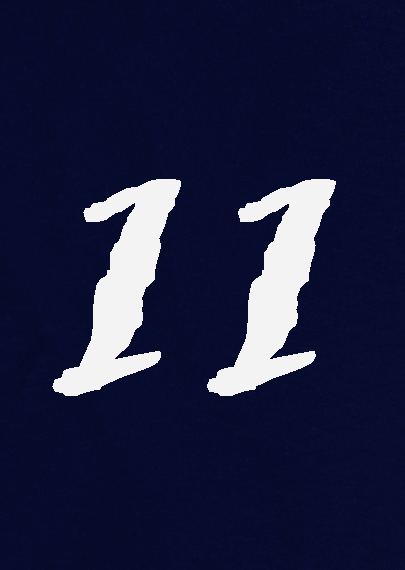
<style>
.page{position:relative;width:405px;height:570px}
.page>*{position:absolute;margin:0}
.t1{font:617.1px "BlackadderITC-Regular";color:#f3f3f3}
</style>
<div class="page">
<p class="t1" style="left:52px;top:179px;width:284px;height:217px">11</p>
</div>
